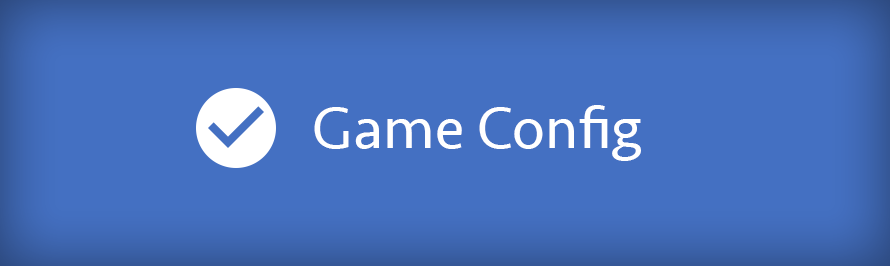
<style>
.page{position:relative;width:890px;height:266px;background:#4470c2}
.page>*{position:absolute;margin:0}
.t1{font:60px "Seravek";color:#ffffff}
</style>
<div class="page">
<p class="t1" style="left:314px;top:105px;width:327px;height:56px">Game Config</p>
</div>
